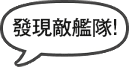
<style>
.page{position:relative;width:129px;height:67px;background:#ffffff}
.page>*{position:absolute;margin:0}
.t1{font:20px "GothicMB101Pr6N-Medium";color:#181817}
</style>
<div class="page">
<p class="t1" style="left:12px;top:17px;width:105px;height:20px">發現敵艦隊!</p>
</div>
